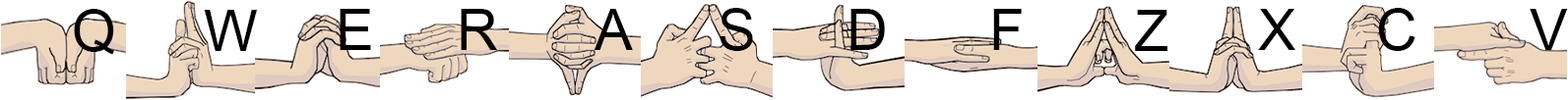
<style>
.page{position:relative;width:1568px;height:100px;background:#ffffff}
.page>*{position:absolute;margin:0}
.t1{font:57.4px "ArialMT";color:#000000}
</style>
<div class="page">
<p class="t1" style="left:74px;top:9px;width:40px;height:46px">Q</p>
<p class="t1" style="left:204px;top:10px;width:53px;height:41px">W</p>
<p class="t1" style="left:340px;top:9px;width:31px;height:41px">E</p>
<p class="t1" style="left:461px;top:9px;width:36px;height:41px">R</p>
<p class="t1" style="left:594px;top:9px;width:39px;height:41px">A</p>
<p class="t1" style="left:720px;top:8px;width:33px;height:43px">S</p>
<p class="t1" style="left:850px;top:9px;width:35px;height:41px">D</p>
<p class="t1" style="left:993px;top:9px;width:29px;height:41px">F</p>
<p class="t1" style="left:1135px;top:10px;width:32px;height:41px">Z</p>
<p class="t1" style="left:1258px;top:9px;width:37px;height:41px">X</p>
<p class="t1" style="left:1378px;top:8px;width:37px;height:43px">C</p>
<p class="t1" style="left:1530px;top:9px;width:38px;height:41px">V</p>
</div>
